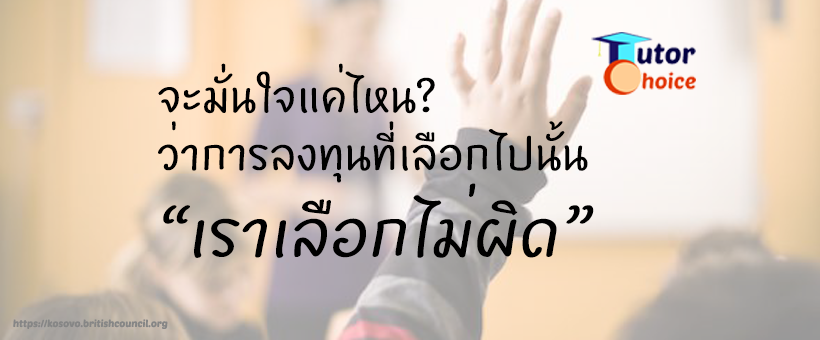
<style>
.page{position:relative;width:820px;height:340px}
.page>*{position:absolute;margin:0}
.t1{font:48px "BoonJot-400";color:#000000}
.t2{font:72px "BoonJot-400i";color:#000000}
.t3{font:10px "PoetsenOne-Regular";color:#868686}
</style>
<div class="page">
<p class="t1" style="left:158px;top:63px;width:436px;height:195px">จะมั่นใจแค่ไหน?<br>ว่าการลงทุนที่เลือกไปนั้น<br><span class="t2">“เราเลือกไม่ผิด”</span></p>
<p class="t3" style="left:13px;top:319px;width:155px;height:10px">https://kosovo.britishcouncil.org</p>
</div>
